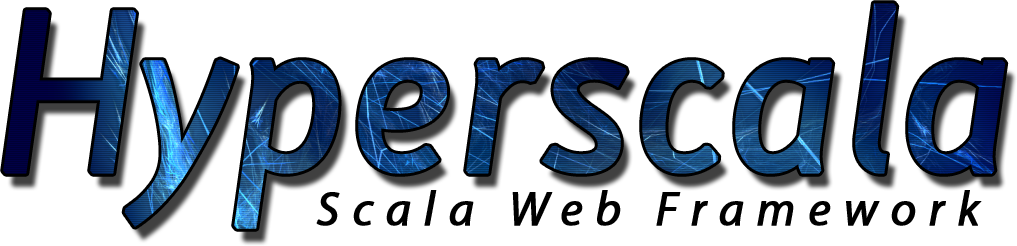
<style>
.page{position:relative;width:1017px;height:246px;background:#ffffff}
.page>*{position:absolute;margin:0}
.t1{font:200px "LacunaItalic";font-weight:bold}
.t2{font:48px "MyriadPro-It";letter-spacing:0.25em;color:#000000;font-weight:bold}
</style>
<div class="page">
<p class="t1" style="left:3px;top:3px;width:1003px;height:226px">Hyperscala</p>
<p class="t2" style="left:316px;top:190px;width:666px;height:36px">Scala Web Framework</p>
</div>
